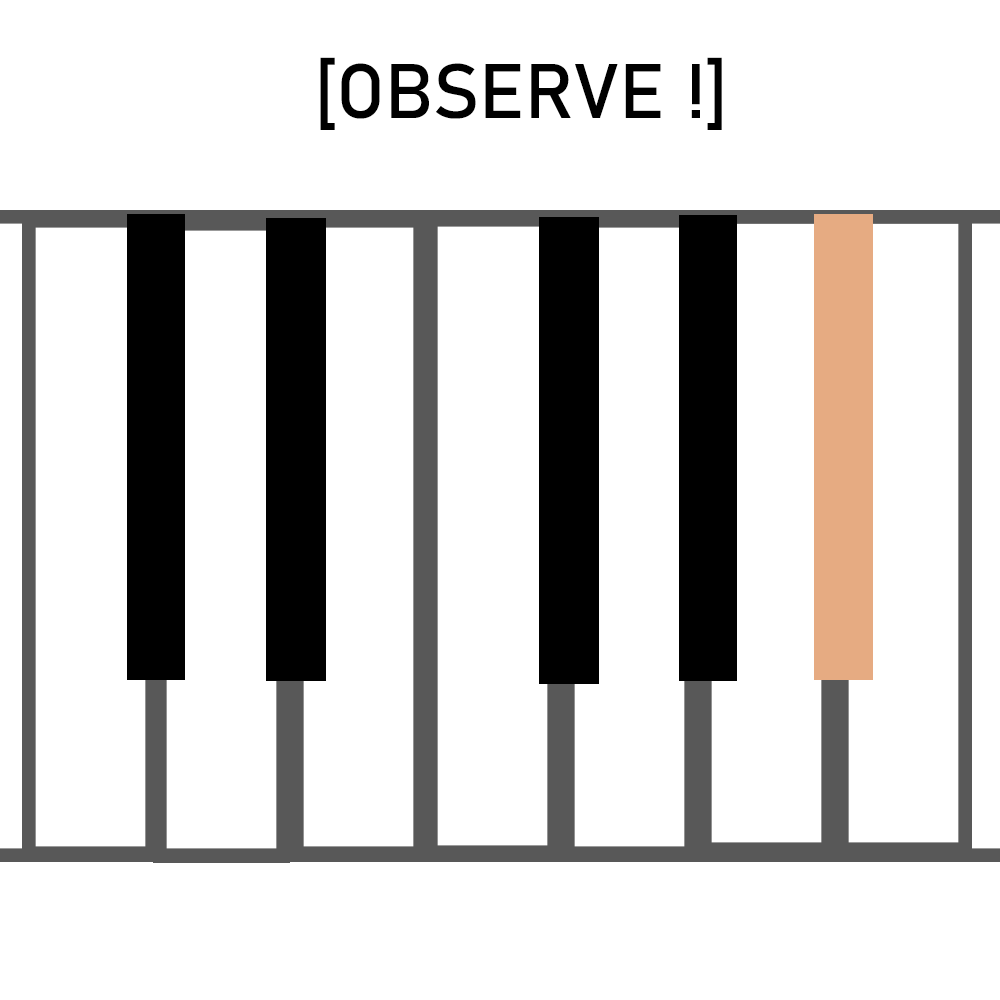
<style>
.page{position:relative;width:1000px;height:1000px;background:#ffffff}
.page>*{position:absolute;margin:0}
.t1{font:129.9px "Bahnschrift";letter-spacing:0.005em;color:#000000}
</style>
<div class="page">
<p class="t1" style="left:320px;top:57px;width:402px;height:73px">[OBSERVE !]</p>
</div>
